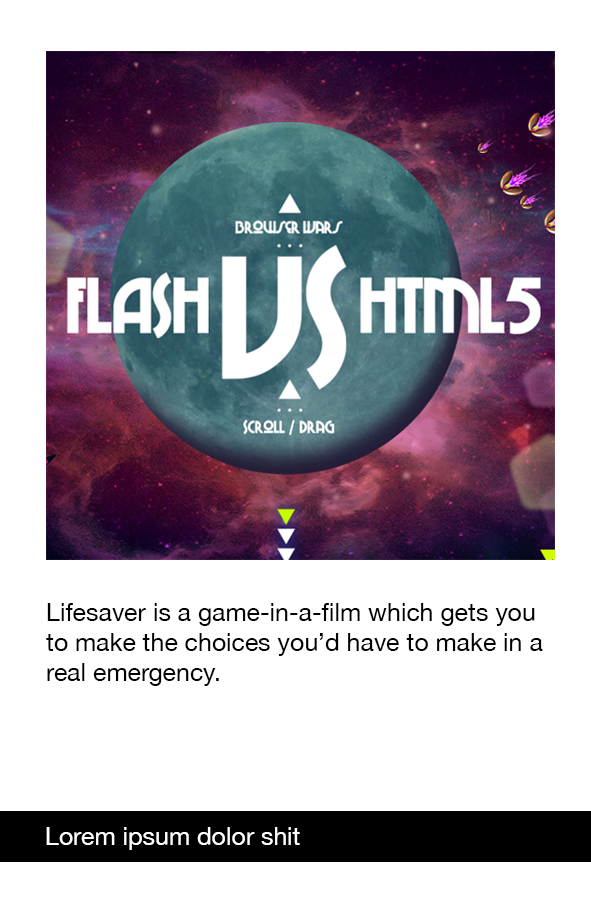
<style>
.page{position:relative;width:591px;height:898px;background:#ffffff}
.page>*{position:absolute;margin:0}
.t1{font:24.9px "HelveticaNeue";color:#000000}
.t2{font:25px "HelveticaNeue";color:#ffffff}
</style>
<div class="page">
<p class="t1" style="left:46px;top:603px;width:497px;height:83px">Lifesaver is a game-in-a-film which gets you to make the choices you’d have to make in a real emergency.</p>
<p class="t2" style="left:46px;top:827px;width:254px;height:23px">Lorem ipsum dolor shit</p>
</div>
